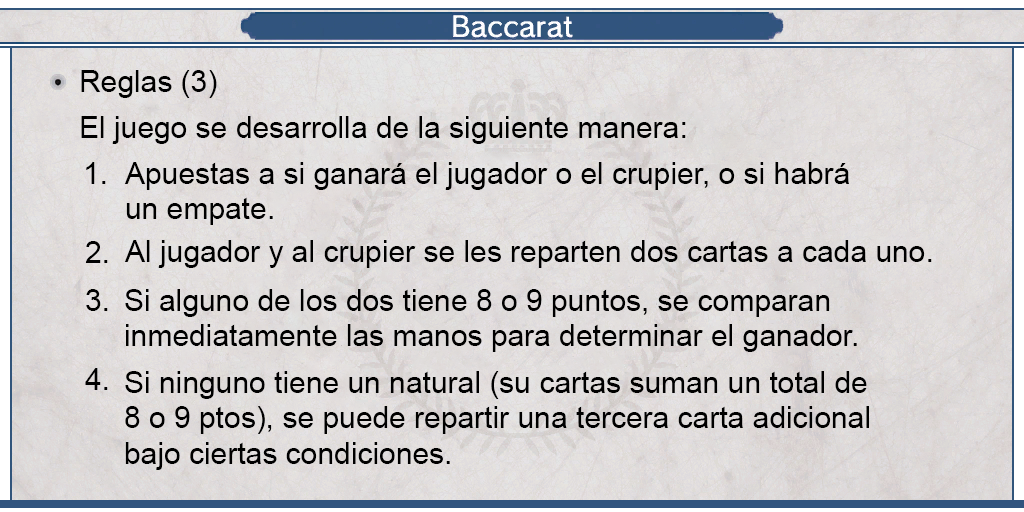
<style>
.page{position:relative;width:1024px;height:512px}
.page>*{position:absolute;margin:0}
.t1{font:29.9px "ArialMT";color:#000000}
</style>
<div class="page">
<p class="t1" style="left:81px;top:70px;width:136px;height:28px">Reglas (3)</p>
<p class="t1" style="left:81px;top:116px;width:605px;height:28px">El juego se desarrolla de la siguiente manera:</p>
<p class="t1" style="left:86px;top:162px;width:20px;height:22px">1.</p>
<p class="t1" style="left:124px;top:162px;width:725px;height:63px;text-align:justify">Apuestas a si ganará el jugador o el crupier, o si habrá <br>un empate.</p>
<p class="t1" style="left:85px;top:241px;width:23px;height:22px">2.</p>
<p class="t1" style="left:124px;top:240px;width:808px;height:28px">Al jugador y al crupier se les reparten dos cartas a cada uno.</p>
<p class="t1" style="left:86px;top:289px;width:22px;height:22px">3.</p>
<p class="t1" style="left:125px;top:289px;width:732px;height:63px;text-align:justify">Si alguno de los dos tiene 8 o 9 puntos, se comparan <br>inmediatamente las manos para determinar el ganador.</p>
<p class="t1" style="left:85px;top:368px;width:23px;height:22px">4.</p>
<p class="t1" style="left:125px;top:371px;width:744px;height:99px;text-align:justify">Si ninguno tiene un natural (su cartas suman un total de <br>8 o 9 ptos), se puede repartir una tercera carta adicional <br>bajo ciertas condiciones.</p>
</div>
